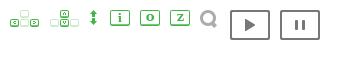
<style>
.page{position:relative;width:350px;height:60px;background:#ffffff}
.page>*{position:absolute;margin:0}
.t1{font:12px "Vani-Bold";color:#44b549}
.t2{font:14px "Vani-Bold";color:#44b549}
</style>
<div class="page">
<p class="t1" style="left:117px;top:13px;width:5px;height:9px">i</p>
<p class="t2" style="left:146px;top:14px;width:9px;height:7px">o</p>
<p class="t2" style="left:177px;top:14px;width:7px;height:7px">z</p>
</div>
